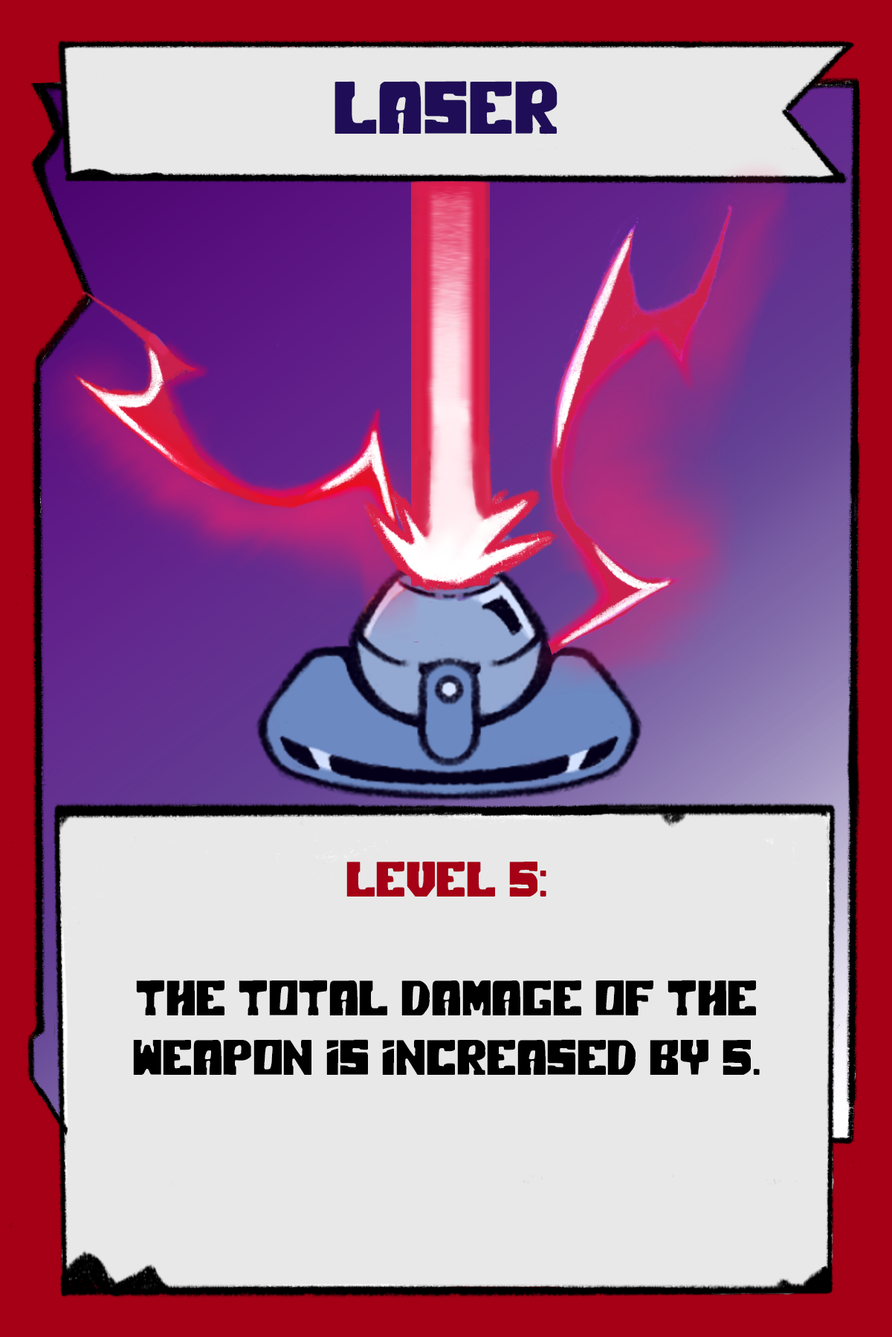
<style>
.page{position:relative;width:892px;height:1337px;background:#e8e8e8}
.page>*{position:absolute;margin:0}
.t1{font:74.3px "PolarPress";color:#1f0e57}
.t2{font:49.5px "PolarPress";color:#000000}
.t3{font:49.5px "PolarPress";color:#a50015}
</style>
<div class="page">
<p class="t1" style="left:334px;top:81px;width:223px;height:53px">LASER</p>
<p class="t2" style="left:133px;top:862px;width:626px;height:213px;text-align:center"><span class="t3">LEVEL 5:<br><br></span>The total damage of the weapon is increased by 5.</p>
</div>
